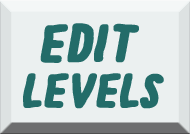
<style>
.page{position:relative;width:190px;height:134px;background:#ebf0f0}
.page>*{position:absolute;margin:0}
.t1{font:92px "BeautifulHeartbeat";color:#236c69;font-weight:bold;font-style:italic}
.t2{font:82.4px "BeautifulHeartbeat";color:#236c69;font-weight:bold;font-style:italic}
</style>
<div class="page">
<p class="t1" style="left:40px;top:23px;width:99px;height:40px">edit</p>
<p class="t2" style="left:23px;top:73px;width:141px;height:36px">levels</p>
</div>
